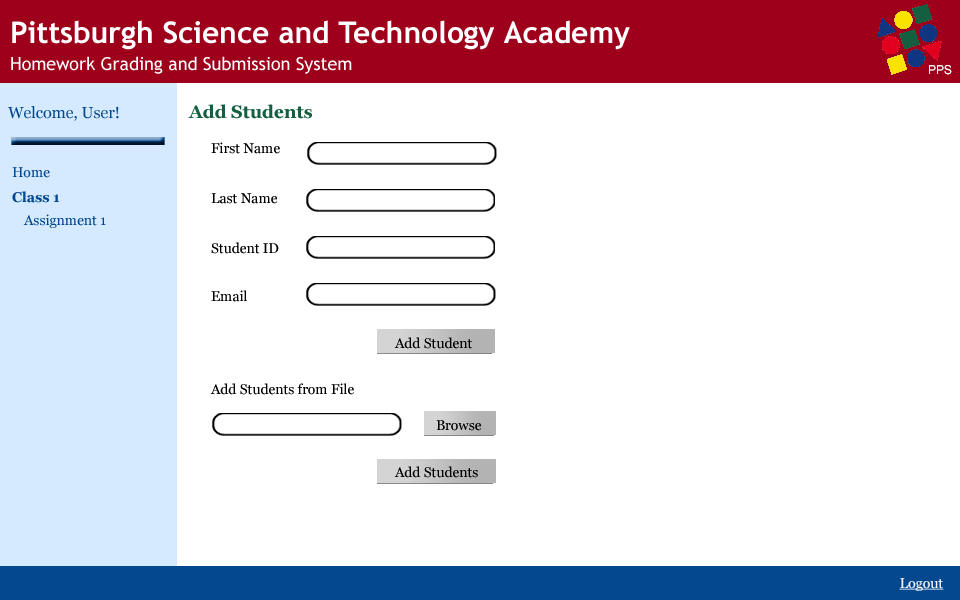
<style>
.page{position:relative;width:960px;height:600px;background:#ffffff}
.page>*{position:absolute;margin:0}
.t1{font:15.9px "Georgia";color:#044990}
.t2{font:17.9px "Georgia-Bold";color:#145f40}
.t3{font:13.9px "Georgia";color:#000000}
.t4{font:13.9px "Georgia";color:#044990}
.t5{font:13.9px "Georgia-Bold";color:#044990}
</style>
<div class="page">
<p class="t1" style="left:8px;top:106px;width:111px;height:15px">Welcome, User!</p>
<p class="t2" style="left:188px;top:104px;width:124px;height:15px">Add Students</p>
<p class="t3" style="left:210px;top:142px;width:144px;height:253px">First Name<br><br><br>Last Name<br><br><br>Student ID<br><br><br><br>Email<br><br><br><br><br><br><br><br><br><br><br>Add Students from File</p>
<p class="t4" style="left:12px;top:167px;width:38px;height:11px">Home</p>
<p class="t5" style="left:12px;top:191px;width:48px;height:12px">Class 1</p>
<p class="t4" style="left:23px;top:214px;width:83px;height:14px">Assignment 1</p>
<p class="t3" style="left:394px;top:337px;width:78px;height:12px">Add Student</p>
<p class="t3" style="left:436px;top:420px;width:46px;height:11px">Browse</p>
<p class="t3" style="left:394px;top:466px;width:84px;height:12px">Add Students</p>
</div>
